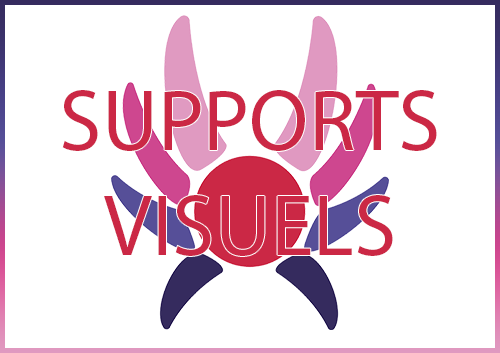
<style>
.page{position:relative;width:500px;height:353px;background:#ffffff}
.page>*{position:absolute;margin:0}
.t1{font:87.9px "MyriadPro-Regular";color:#cb2845}
</style>
<div class="page">
<p class="t1" style="left:62px;top:90px;width:375px;height:166px;text-align:center">SUPPORTS<br>VISUELS</p>
</div>
